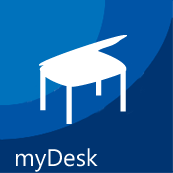
<style>
.page{position:relative;width:173px;height:173px;background:#003471}
.page>*{position:absolute;margin:0}
.t1{font:24px "SegoeWP";color:#ffffff}
</style>
<div class="page">
<p class="t1" style="left:16px;top:148px;width:82px;height:24px">myDesk</p>
</div>
